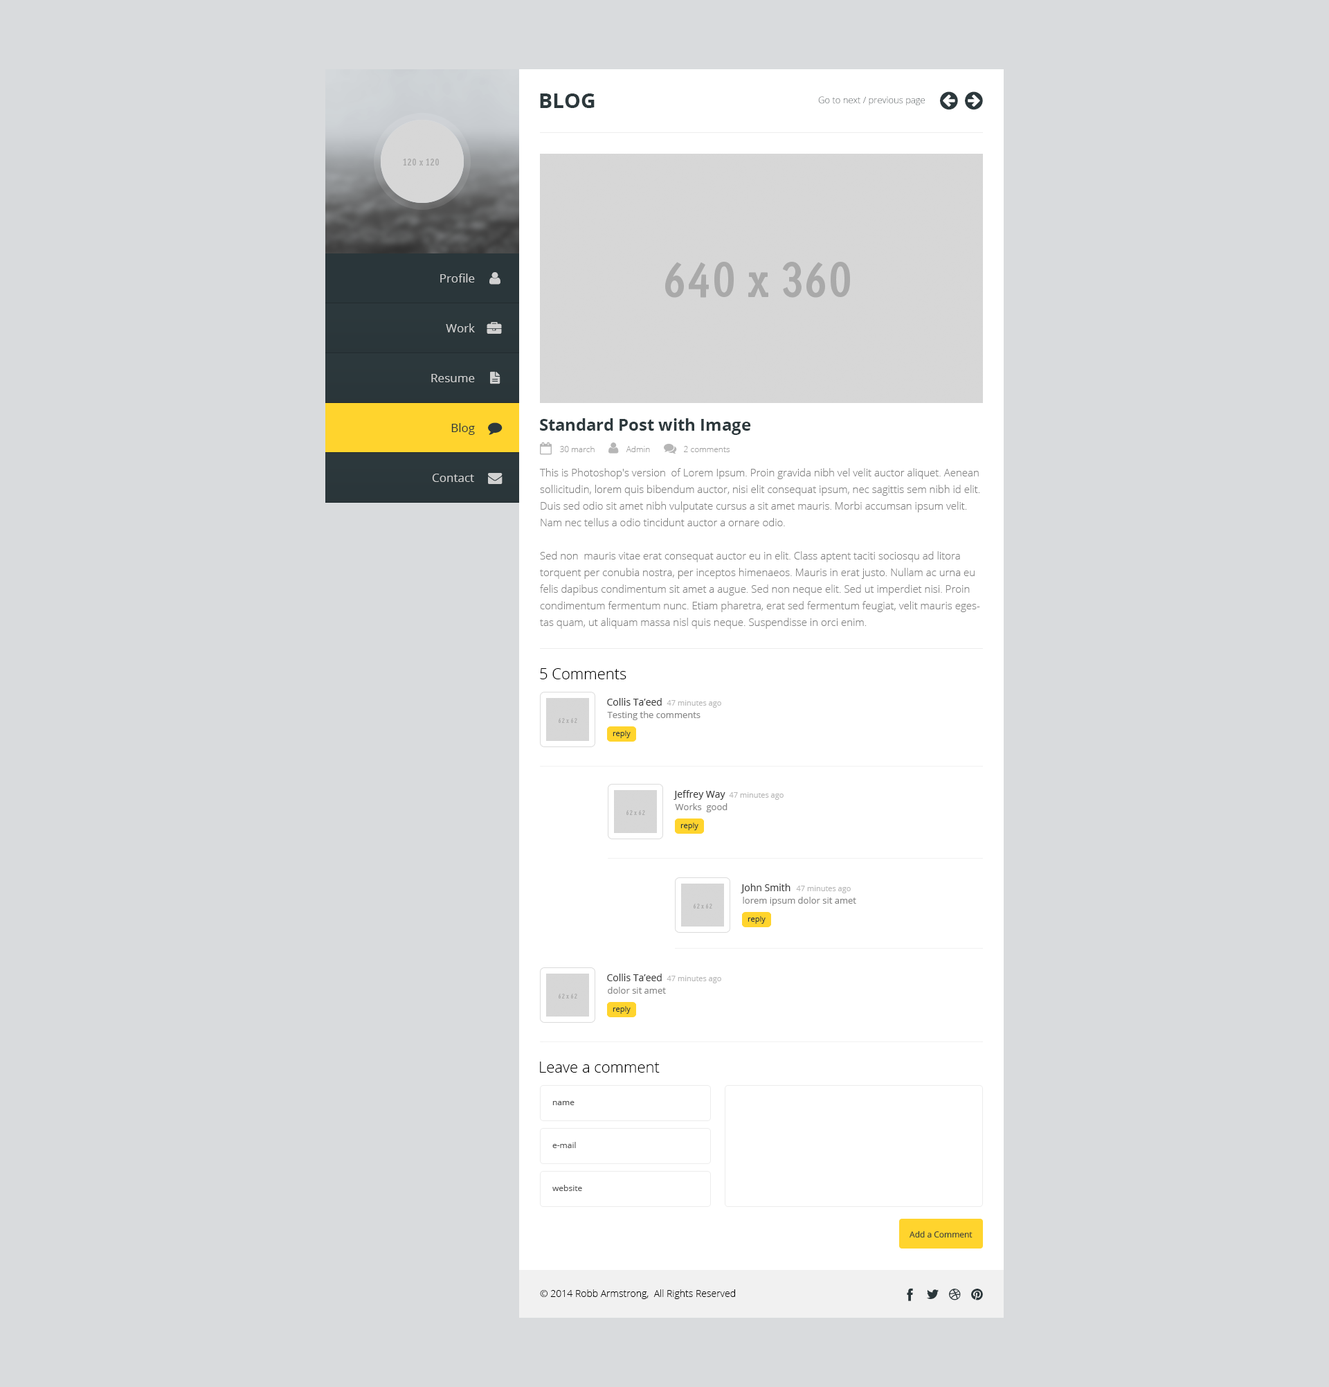
<style>
.page{position:relative;width:1329px;height:1387px;background:#d9dbdd}
.page>*{position:absolute;margin:0}
.t1{font:20.8px "OpenSans-Bold";color:#2c383c;text-transform:uppercase}
.t2{font:9px "OpenSans-Light"}
.t3{font:11.8px "OpenSans";color:#d1d1d1}
.t4{font:11.8px "OpenSans";color:#2c383c}
.t5{font:16.6px "OpenSans-Bold";color:#2c383c}
.t6{font:8.3px "OpenSans-Light";color:#a1a1a1}
.t7{font:10.4px/16.6px "OpenSans-Light";color:#828282}
.t8{font:15.2px "OpenSans-Light";color:#000000}
.t9{font:9.7px "OpenSans";color:#3c3c3c}
.t10{font:7.6px "OpenSans";color:#b8b8b8}
.t11{font:9px "OpenSans";color:#868686}
.t12{font:7.6px "OpenSans";color:#2b373b}
.t13{font:8.3px "OpenSans";color:#555555}
.t14{font:8.3px "OpenSans";color:#2b373b}
.t15{font:9.7px "OpenSans-Light";color:#000000}
</style>
<div class="page">
<p class="t1" style="left:540px;top:93px;width:55px;height:15px">Blog</p>
<p class="t2" style="left:818px;top:96px;width:107px;height:9px">Go to next / previous page</p>
<p class="t3" style="left:440px;top:273px;width:35px;height:9px">Profile</p>
<p class="t3" style="left:446px;top:323px;width:29px;height:9px">Work</p>
<p class="t3" style="left:431px;top:374px;width:44px;height:8px">Resume</p>
<p class="t4" style="left:451px;top:423px;width:24px;height:12px">Blog</p>
<p class="t5" style="left:540px;top:418px;width:211px;height:17px">Standard Post with Image</p>
<p class="t6" style="left:559px;top:446px;width:36px;height:6px">30 march</p>
<p class="t6" style="left:626px;top:446px;width:24px;height:6px">Admin</p>
<p class="t6" style="left:684px;top:446px;width:46px;height:6px">2 comments</p>
<p class="t3" style="left:432px;top:474px;width:42px;height:8px">Contact</p>
<p class="t7" style="left:539px;top:468px;width:441px;height:161px">This is Photoshop's version  of Lorem Ipsum. Proin gravida nibh vel velit auctor aliquet. Aenean sollicitudin, lorem quis bibendum auctor, nisi elit consequat ipsum, nec sagittis sem nibh id elit. Duis sed odio sit amet nibh vulputate cursus a sit amet mauris. Morbi accumsan ipsum velit. Nam nec tellus a odio tincidunt auctor a ornare odio. <br><br>Sed non  mauris vitae erat consequat auctor eu in elit. Class aptent taciti sociosqu ad litora torquent per conubia nostra, per inceptos himenaeos. Mauris in erat justo. Nullam ac urna eu felis dapibus condimentum sit amet a augue. Sed non neque elit. Sed ut imperdiet nisi. Proin condimentum fermentum nunc. Etiam pharetra, erat sed fermentum feugiat, velit mauris egestas quam, ut aliquam massa nisl quis neque. Suspendisse in orci enim.</p>
<p class="t8" style="left:540px;top:668px;width:87px;height:11px">5 Comments</p>
<p class="t9" style="left:607px;top:698px;width:55px;height:7px">Collis Ta’eed</p>
<p class="t10" style="left:667px;top:700px;width:54px;height:8px">47 minutes ago</p>
<p class="t11" style="left:607px;top:711px;width:94px;height:9px">Testing the comments</p>
<p class="t12" style="left:613px;top:730px;width:18px;height:8px">reply</p>
<p class="t9" style="left:674px;top:790px;width:52px;height:10px">Jeffrey Way</p>
<p class="t10" style="left:729px;top:792px;width:55px;height:8px">47 minutes ago</p>
<p class="t11" style="left:675px;top:803px;width:53px;height:9px">Works  good</p>
<p class="t12" style="left:681px;top:822px;width:18px;height:8px">reply</p>
<p class="t9" style="left:741px;top:883px;width:50px;height:10px">John Smith</p>
<p class="t10" style="left:796px;top:885px;width:55px;height:8px">47 minutes ago</p>
<p class="t11" style="left:743px;top:897px;width:113px;height:9px">lorem ipsum dolor sit amet</p>
<p class="t12" style="left:748px;top:916px;width:18px;height:8px">reply</p>
<p class="t9" style="left:607px;top:973px;width:55px;height:8px">Collis Ta’eed</p>
<p class="t10" style="left:667px;top:975px;width:54px;height:8px">47 minutes ago</p>
<p class="t11" style="left:608px;top:987px;width:58px;height:6px">dolor sit amet</p>
<p class="t12" style="left:613px;top:1006px;width:18px;height:8px">reply</p>
<p class="t8" style="left:540px;top:1061px;width:120px;height:11px">Leave a comment</p>
<p class="t13" style="left:552px;top:1101px;width:23px;height:4px">name</p>
<p class="t13" style="left:552px;top:1142px;width:24px;height:6px">e-mail</p>
<p class="t13" style="left:552px;top:1185px;width:30px;height:6px">website</p>
<p class="t14" style="left:910px;top:1230px;width:63px;height:8px">Add a Comment</p>
<p class="t15" style="left:540px;top:1289px;width:195px;height:10px">© 2014 Robb Armstrong,  All Rights Reserved</p>
</div>
